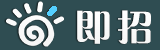
<style>
.page{position:relative;width:160px;height:50px;background:#2f4d52}
.page>*{position:absolute;margin:0}
.t1{font:36px "GJJCQJW--GB1-0";letter-spacing:0.16em;color:#ffffff}
</style>
<div class="page">
<p class="t1" style="left:77px;top:10px;width:74px;height:34px">即招</p>
</div>
